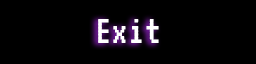
<style>
.page{position:relative;width:256px;height:64px;background:#000000}
.page>*{position:absolute;margin:0}
.t1{font:41.8px "VT323-Regular";color:#ffffff}
</style>
<div class="page">
<p class="t1" style="left:98px;top:19px;width:61px;height:24px">Exit</p>
</div>
